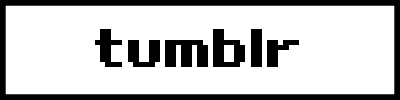
<style>
.page{position:relative;width:400px;height:100px;background:#ffffff}
.page>*{position:absolute;margin:0}
.t1{font:50px "YamahaEBMSevenBold";color:#000000}
</style>
<div class="page">
<p class="t1" style="left:95px;top:29px;width:204px;height:38px">tumblr</p>
</div>
